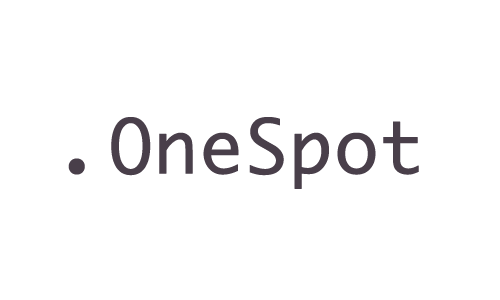
<style>
.page{position:relative;width:500px;height:300px;background:#ffffff}
.page>*{position:absolute;margin:0}
.t1{font:72px "Monaco";color:#493f4a;font-weight:bold}
.t2{font:72px "StencilStd";color:#493f4a;font-weight:bold}
</style>
<div class="page">
<p class="t1" style="left:68px;top:117px;width:351px;height:72px"><span class="t2">. </span>OneSpot</p>
</div>
